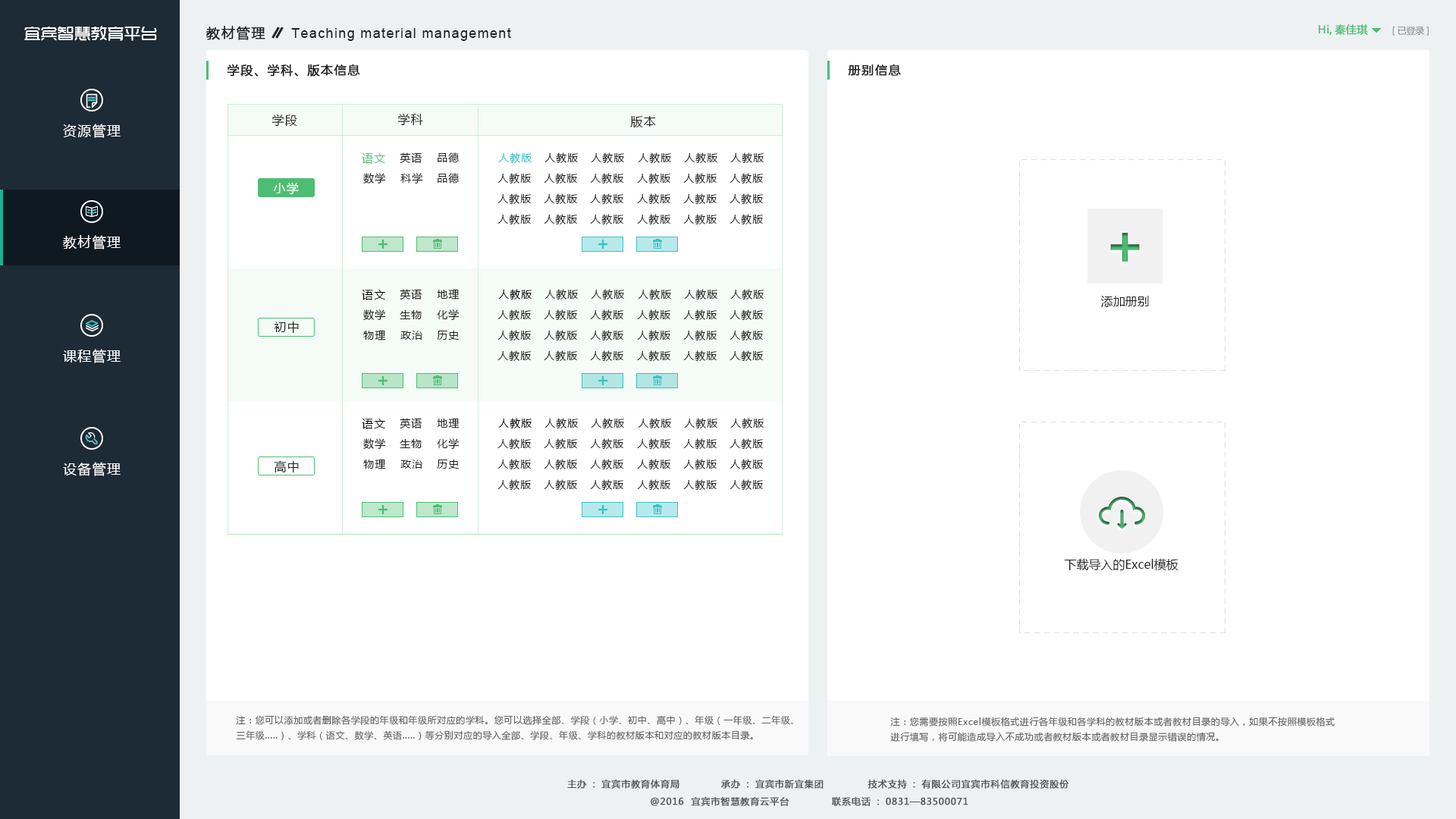
<style>
.page{position:relative;width:1456px;height:819px;background:#ffffff}
.page>*{position:absolute;margin:0}
.t1{font:16.7px "TRENDS";color:#ffffff}
.t2{font:13.6px "MicrosoftYaHei";letter-spacing:0.075em;color:#222222;font-weight:bold}
.t3{font:13.6px "ArialMT";letter-spacing:0.075em;color:#222222}
.t4{font:10.6px "MicrosoftYaHei";color:#4dbd73;font-weight:bold}
.t5{font:9.1px "MicrosoftYaHei";letter-spacing:-0.01em;color:#868686}
.t6{font:12.1px "MicrosoftYaHei";letter-spacing:0.075em;color:#222222;font-weight:bold}
.t7{font:12.1px "MicrosoftYaHei";letter-spacing:0.075em;color:#222222}
.t8{font:13.6px "MicrosoftYaHei";letter-spacing:0.075em;color:#ffffff}
.t9{font:11.4px "MicrosoftYaHei";letter-spacing:0.075em;color:#4dbd73}
.t10{font:10.6px "MicrosoftYaHei";letter-spacing:0.075em;color:#222222}
.t11{font:10.6px "MicrosoftYaHei";letter-spacing:0.075em;color:#3bc2c5}
.t12{font:12.1px "MicrosoftYaHei";letter-spacing:0.075em;color:#ffffff}
.t13{font:11.4px "MicrosoftYaHei";letter-spacing:0.075em;color:#000000}
.t14{font:10.6px "MicrosoftYaHei";letter-spacing:0.075em;color:#000000}
.t15{font:12.1px "MicrosoftYaHei";color:#222222}
.t16{font:9.1px/15.2px "MicrosoftYaHei";letter-spacing:0.05em;color:#646464}
.t17{font:9.1px "MicrosoftYaHei";letter-spacing:0.05em;color:#545454;font-weight:bold}
</style>
<div class="page">
<p class="t1" style="left:24px;top:26px;width:133px;height:15px">宜宾智慧教育平台</p>
<p class="t2" style="left:206px;top:26px;width:59px;height:14px">教材管理</p>
<p class="t3" style="left:291px;top:28px;width:220px;height:13px">Teaching material management</p>
<p class="t4" style="left:1319px;top:24px;width:49px;height:11px">Hi,秦佳琪</p>
<p class="t5" style="left:1392px;top:26px;width:37px;height:10px">[已登录]</p>
<p class="t6" style="left:227px;top:64px;width:133px;height:13px">学段、学科、版本信息</p>
<p class="t6" style="left:848px;top:64px;width:53px;height:12px">册别信息</p>
<p class="t7" style="left:272px;top:114px;width:25px;height:13px">学段</p>
<p class="t7" style="left:398px;top:113px;width:25px;height:13px">学科</p>
<p class="t8" style="left:63px;top:124px;width:58px;height:14px">资源管理</p>
<p class="t7" style="left:630px;top:116px;width:26px;height:11px">版本</p>
<p class="t9" style="left:362px;top:152px;width:23px;height:12px">语文</p>
<p class="t10" style="left:400px;top:152px;width:22px;height:12px">英语</p>
<p class="t10" style="left:438px;top:152px;width:21px;height:11px">品德</p>
<p class="t11" style="left:498px;top:152px;width:34px;height:11px">人教版</p>
<p class="t10" style="left:544px;top:152px;width:35px;height:11px">人教版</p>
<p class="t10" style="left:591px;top:152px;width:34px;height:11px">人教版</p>
<p class="t10" style="left:638px;top:152px;width:34px;height:11px">人教版</p>
<p class="t10" style="left:684px;top:152px;width:34px;height:11px">人教版</p>
<p class="t10" style="left:730px;top:152px;width:34px;height:11px">人教版</p>
<p class="t10" style="left:363px;top:173px;width:23px;height:11px">数学</p>
<p class="t10" style="left:400px;top:173px;width:23px;height:11px">科学</p>
<p class="t10" style="left:438px;top:173px;width:21px;height:11px">品德</p>
<p class="t10" style="left:497px;top:173px;width:35px;height:11px">人教版</p>
<p class="t10" style="left:544px;top:173px;width:34px;height:11px">人教版</p>
<p class="t10" style="left:590px;top:173px;width:34px;height:11px">人教版</p>
<p class="t10" style="left:637px;top:173px;width:34px;height:11px">人教版</p>
<p class="t10" style="left:683px;top:173px;width:34px;height:11px">人教版</p>
<p class="t10" style="left:730px;top:173px;width:34px;height:11px">人教版</p>
<p class="t12" style="left:274px;top:182px;width:25px;height:13px">小学</p>
<p class="t10" style="left:497px;top:193px;width:35px;height:11px">人教版</p>
<p class="t10" style="left:544px;top:193px;width:34px;height:11px">人教版</p>
<p class="t10" style="left:590px;top:193px;width:34px;height:11px">人教版</p>
<p class="t10" style="left:637px;top:193px;width:34px;height:11px">人教版</p>
<p class="t10" style="left:683px;top:193px;width:34px;height:11px">人教版</p>
<p class="t10" style="left:730px;top:193px;width:34px;height:11px">人教版</p>
<p class="t10" style="left:497px;top:214px;width:35px;height:10px">人教版</p>
<p class="t10" style="left:544px;top:214px;width:34px;height:10px">人教版</p>
<p class="t10" style="left:590px;top:214px;width:34px;height:10px">人教版</p>
<p class="t10" style="left:637px;top:214px;width:34px;height:10px">人教版</p>
<p class="t10" style="left:683px;top:214px;width:34px;height:10px">人教版</p>
<p class="t10" style="left:730px;top:214px;width:34px;height:10px">人教版</p>
<p class="t8" style="left:63px;top:235px;width:58px;height:14px">教材管理</p>
<p class="t13" style="left:362px;top:289px;width:23px;height:11px">语文</p>
<p class="t10" style="left:400px;top:289px;width:22px;height:11px">英语</p>
<p class="t10" style="left:437px;top:289px;width:23px;height:11px">地理</p>
<p class="t14" style="left:498px;top:289px;width:34px;height:11px">人教版</p>
<p class="t10" style="left:544px;top:289px;width:35px;height:11px">人教版</p>
<p class="t10" style="left:591px;top:289px;width:34px;height:11px">人教版</p>
<p class="t10" style="left:638px;top:289px;width:34px;height:11px">人教版</p>
<p class="t10" style="left:684px;top:289px;width:34px;height:11px">人教版</p>
<p class="t10" style="left:730px;top:289px;width:34px;height:11px">人教版</p>
<p class="t15" style="left:1101px;top:296px;width:48px;height:11px">添加册别</p>
<p class="t10" style="left:363px;top:309px;width:23px;height:11px">数学</p>
<p class="t10" style="left:400px;top:310px;width:22px;height:9px">生物</p>
<p class="t10" style="left:437px;top:309px;width:23px;height:11px">化学</p>
<p class="t10" style="left:497px;top:309px;width:35px;height:11px">人教版</p>
<p class="t10" style="left:544px;top:309px;width:34px;height:11px">人教版</p>
<p class="t10" style="left:590px;top:309px;width:34px;height:11px">人教版</p>
<p class="t10" style="left:637px;top:309px;width:34px;height:11px">人教版</p>
<p class="t10" style="left:683px;top:309px;width:34px;height:11px">人教版</p>
<p class="t10" style="left:730px;top:309px;width:34px;height:11px">人教版</p>
<p class="t7" style="left:274px;top:322px;width:25px;height:11px">初中</p>
<p class="t10" style="left:363px;top:330px;width:23px;height:10px">物理</p>
<p class="t10" style="left:497px;top:330px;width:35px;height:10px">人教版</p>
<p class="t10" style="left:544px;top:330px;width:34px;height:10px">人教版</p>
<p class="t10" style="left:590px;top:330px;width:34px;height:10px">人教版</p>
<p class="t10" style="left:637px;top:330px;width:34px;height:10px">人教版</p>
<p class="t10" style="left:683px;top:330px;width:34px;height:10px">人教版</p>
<p class="t10" style="left:730px;top:330px;width:34px;height:10px">人教版</p>
<p class="t10" style="left:400px;top:331px;width:22px;height:9px">政治</p>
<p class="t10" style="left:437px;top:331px;width:22px;height:9px">历史</p>
<p class="t8" style="left:63px;top:349px;width:58px;height:14px">课程管理</p>
<p class="t10" style="left:497px;top:350px;width:35px;height:11px">人教版</p>
<p class="t10" style="left:544px;top:350px;width:34px;height:11px">人教版</p>
<p class="t10" style="left:590px;top:350px;width:34px;height:11px">人教版</p>
<p class="t10" style="left:637px;top:350px;width:34px;height:11px">人教版</p>
<p class="t10" style="left:683px;top:350px;width:34px;height:11px">人教版</p>
<p class="t10" style="left:730px;top:350px;width:34px;height:11px">人教版</p>
<p class="t13" style="left:362px;top:418px;width:23px;height:11px">语文</p>
<p class="t10" style="left:400px;top:418px;width:22px;height:11px">英语</p>
<p class="t10" style="left:437px;top:418px;width:23px;height:10px">地理</p>
<p class="t14" style="left:498px;top:418px;width:34px;height:10px">人教版</p>
<p class="t10" style="left:544px;top:418px;width:35px;height:10px">人教版</p>
<p class="t10" style="left:591px;top:418px;width:34px;height:10px">人教版</p>
<p class="t10" style="left:638px;top:418px;width:34px;height:10px">人教版</p>
<p class="t10" style="left:684px;top:418px;width:34px;height:10px">人教版</p>
<p class="t10" style="left:730px;top:418px;width:34px;height:10px">人教版</p>
<p class="t10" style="left:363px;top:438px;width:23px;height:11px">数学</p>
<p class="t10" style="left:400px;top:439px;width:22px;height:9px">生物</p>
<p class="t10" style="left:437px;top:438px;width:23px;height:11px">化学</p>
<p class="t10" style="left:497px;top:438px;width:35px;height:11px">人教版</p>
<p class="t10" style="left:544px;top:438px;width:34px;height:11px">人教版</p>
<p class="t10" style="left:590px;top:438px;width:34px;height:11px">人教版</p>
<p class="t10" style="left:637px;top:438px;width:34px;height:11px">人教版</p>
<p class="t10" style="left:683px;top:438px;width:34px;height:11px">人教版</p>
<p class="t10" style="left:730px;top:438px;width:34px;height:11px">人教版</p>
<p class="t8" style="left:63px;top:462px;width:58px;height:14px">设备管理</p>
<p class="t7" style="left:274px;top:460px;width:25px;height:13px">高中</p>
<p class="t10" style="left:363px;top:459px;width:23px;height:10px">物理</p>
<p class="t10" style="left:400px;top:460px;width:22px;height:9px">政治</p>
<p class="t10" style="left:437px;top:460px;width:22px;height:9px">历史</p>
<p class="t10" style="left:497px;top:459px;width:35px;height:10px">人教版</p>
<p class="t10" style="left:544px;top:459px;width:34px;height:10px">人教版</p>
<p class="t10" style="left:590px;top:459px;width:34px;height:10px">人教版</p>
<p class="t10" style="left:637px;top:459px;width:34px;height:10px">人教版</p>
<p class="t10" style="left:683px;top:459px;width:34px;height:10px">人教版</p>
<p class="t10" style="left:730px;top:459px;width:34px;height:10px">人教版</p>
<p class="t10" style="left:497px;top:479px;width:35px;height:11px">人教版</p>
<p class="t10" style="left:544px;top:479px;width:34px;height:11px">人教版</p>
<p class="t10" style="left:590px;top:479px;width:34px;height:11px">人教版</p>
<p class="t10" style="left:637px;top:479px;width:34px;height:11px">人教版</p>
<p class="t10" style="left:683px;top:479px;width:34px;height:11px">人教版</p>
<p class="t10" style="left:730px;top:479px;width:34px;height:11px">人教版</p>
<p class="t15" style="left:1064px;top:558px;width:114px;height:13px">下载导入的Excel模板</p>
<p class="t16" style="left:236px;top:715px;width:557px;height:25px">注：您可以添加或者删除各学段的年级和年级所对应的学科。您可以选择全部、学段（小学、初中、高中）、年级（一年级、二年级、<br>三年级.....）、学科（语文、数学、英语.....）等分别对应的导入全部、学段、年级、学科的教材版本和对应的教材版本目录。</p>
<p class="t16" style="left:890px;top:717px;width:445px;height:25px">注：您需要按照Excel模板格式进行各年级和各学科的教材版本或者教材目录的导入，如果不按照模板格式<br>进行填写，将可能造成导入不成功或者教材版本或者教材目录显示错误的情况。</p>
<p class="t17" style="left:567px;top:780px;width:112px;height:9px">主办：宜宾市教育体育局</p>
<p class="t17" style="left:721px;top:780px;width:103px;height:9px">承办：宜宾市新宜集团</p>
<p class="t17" style="left:868px;top:780px;width:201px;height:9px">技术支持：有限公司宜宾市科信教育投资股份</p>
<p class="t17" style="left:651px;top:797px;width:138px;height:9px">@2016  宜宾市智慧教育云平台</p>
<p class="t17" style="left:832px;top:797px;width:136px;height:9px">联系电话：0831—83500071</p>
</div>
